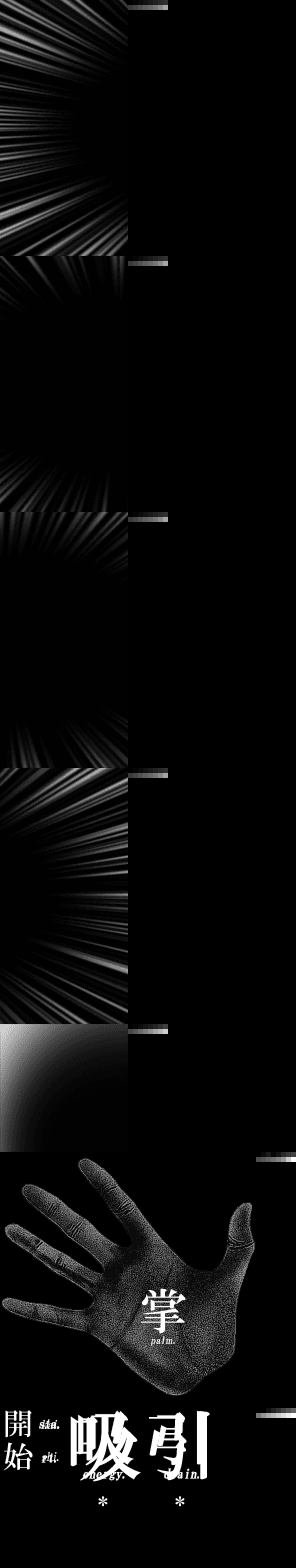
<style>
.page{position:relative;width:296px;height:1568px;background:#000000}
.page>*{position:absolute;margin:0}
.t1{font:10px "HGMinchoB";letter-spacing:0.01em;color:#ffffff;font-style:italic}
.t2{font:10px "HGMinchoB";letter-spacing:0.01em;color:#ffffff;font-style:italic;scale:0.8 1}
.t3{font:13px/34px "HGMinchoB";letter-spacing:-0.025em;color:#ffffff;font-style:italic}
.t4{font:13px/20px "HGMinchoB";letter-spacing:0.01em;color:#ffffff;font-style:italic}
.t5{font:60px/20px "HGMinchoB";letter-spacing:0.01em;color:#ffffff}
.t6{font:13px/18px "HGMinchoB";letter-spacing:0.01em;color:#ffffff;font-style:italic;scale:0.8 1}
.t7{font:13px/20px "HGMinchoB";letter-spacing:0.01em;color:#ffffff;font-style:italic;scale:0.8 1}
</style>
<div class="page">
<p class="t1" style="left:150px;top:1336px;width:25px;height:10px">pal<span class="t2">ｍ</span>.</p>
<p class="t3" style="left:39px;top:1419px;width:21px;height:44px;text-align:center">sta.<br>rt.</p>
<p class="t4" style="left:78px;top:1410px;width:56px;height:71px;text-align:center"><span class="t5">吸<br></span>energy<span class="t6">.</span></p>
<p class="t4" style="left:157px;top:1411px;width:48px;height:68px;text-align:center"><span class="t5">引<br></span>drain<span class="t7">.</span></p>
</div>
